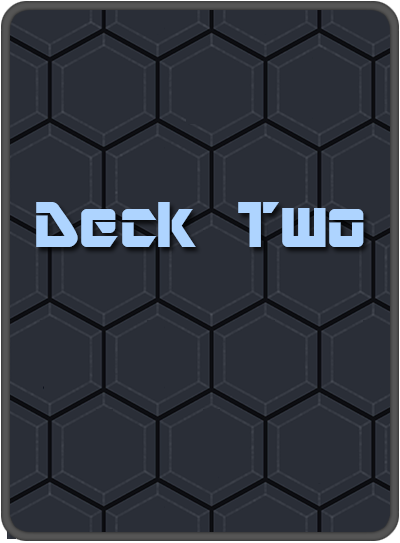
<style>
.page{position:relative;width:400px;height:543px;background:#2a2e37}
.page>*{position:absolute;margin:0}
.t1{font:72px "ARDESTINE";color:#aed4ff}
</style>
<div class="page">
<p class="t1" style="left:36px;top:202px;width:328px;height:45px">Deck Two</p>
</div>
